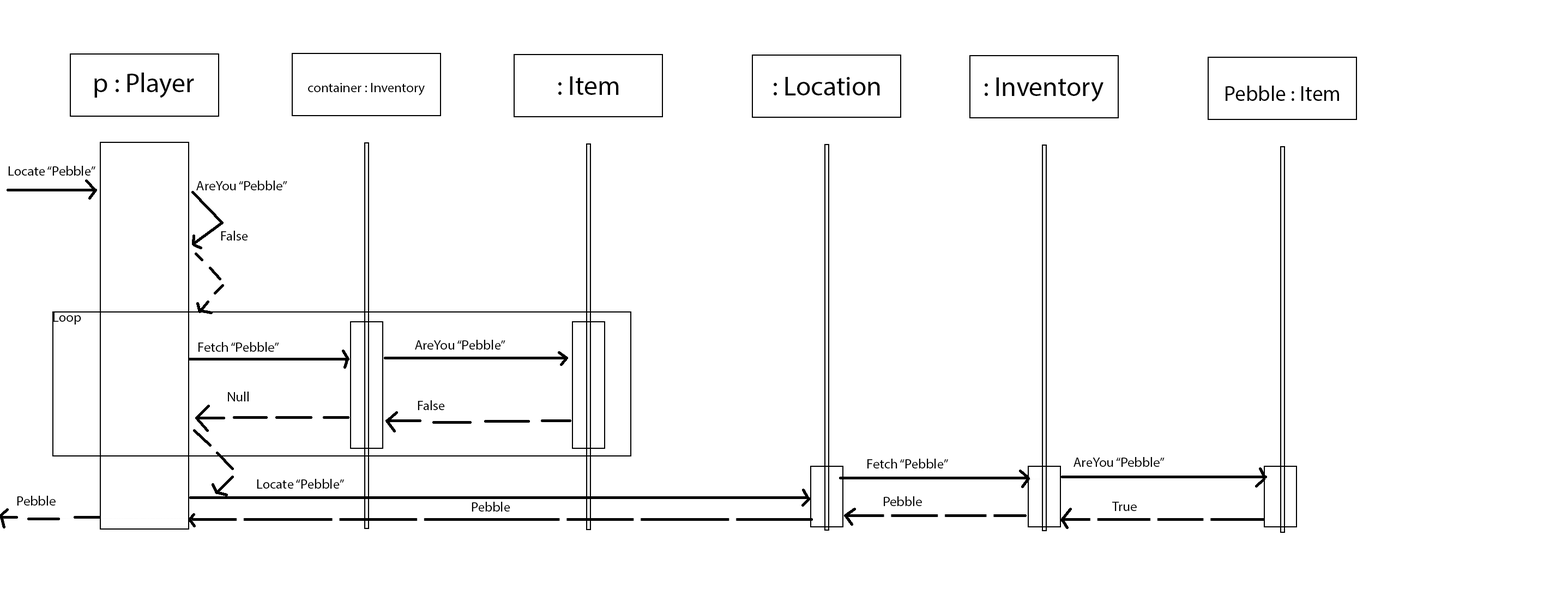
<style>
.page{position:relative;width:1568px;height:589px;background:#ffffff}
.page>*{position:absolute;margin:0}
.t1{font:27.3px "MyriadPro-Regular";color:#000000}
.t2{font:13.6px "MyriadPro-Regular";color:#000000}
.t3{font:21.6px "MyriadPro-Regular";color:#000000}
</style>
<div class="page">
<p class="t1" style="left:94px;top:73px;width:100px;height:25px">p : Player</p>
<p class="t1" style="left:558px;top:76px;width:61px;height:19px">: Item</p>
<p class="t1" style="left:774px;top:77px;width:106px;height:18px">: Location</p>
<p class="t1" style="left:985px;top:77px;width:118px;height:25px">: Inventory</p>
<p class="t2" style="left:308px;top:83px;width:117px;height:12px">container : Inventory</p>
<p class="t3" style="left:1226px;top:86px;width:113px;height:15px">Pebble : Item</p>
<p class="t2" style="left:8px;top:166px;width:87px;height:10px">Locate “Pebble”</p>
<p class="t2" style="left:196px;top:180px;width:91px;height:10px">AreYou “Pebble”</p>
<p class="t2" style="left:221px;top:231px;width:27px;height:9px">False</p>
<p class="t2" style="left:53px;top:312px;width:28px;height:12px">Loop</p>
<p class="t2" style="left:198px;top:342px;width:81px;height:10px">Fetch “Pebble”</p>
<p class="t2" style="left:415px;top:340px;width:90px;height:9px">AreYou “Pebble”</p>
<p class="t2" style="left:228px;top:391px;width:21px;height:10px">Null</p>
<p class="t2" style="left:418px;top:400px;width:27px;height:10px">False</p>
<p class="t2" style="left:867px;top:459px;width:81px;height:9px">Fetch “Pebble”</p>
<p class="t2" style="left:1074px;top:457px;width:91px;height:10px">AreYou “Pebble”</p>
<p class="t2" style="left:257px;top:479px;width:87px;height:10px">Locate “Pebble”</p>
<p class="t2" style="left:17px;top:496px;width:39px;height:9px">Pebble</p>
<p class="t2" style="left:884px;top:496px;width:38px;height:10px">Pebble</p>
<p class="t2" style="left:472px;top:502px;width:38px;height:9px">Pebble</p>
<p class="t2" style="left:1112px;top:502px;width:25px;height:9px">True</p>
</div>
